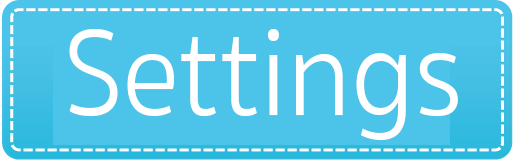
<style>
.page{position:relative;width:513px;height:162px;background:#4cc3e8}
.page>*{position:absolute;margin:0}
.t1{font:125.5px "SukhumvitSet-Light";color:#ffffff;scale:0.91 1}
</style>
<div class="page">
<p class="t1" style="left:69px;top:29px;width:389px;height:111px">Settings</p>
</div>
